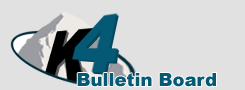
<style>
.page{position:relative;width:245px;height:90px;background:#e1e1e2}
.page>*{position:absolute;margin:0}
.t1{font:18px "Arial-Black";color:#045975}
</style>
<div class="page">
<p class="t1" style="left:77px;top:73px;width:139px;height:14px">Bulletin Board</p>
</div>
